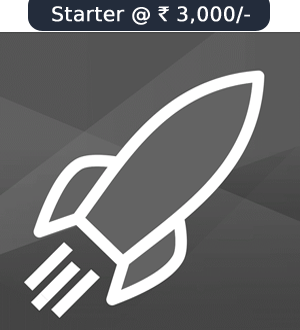
<style>
.page{position:relative;width:300px;height:330px}
.page>*{position:absolute;margin:0}
.t1{font:20px "RupeeForadian";color:#ffffff;font-weight:bold}
</style>
<div class="page">
<p class="t1" style="left:52px;top:6px;width:198px;height:19px">Starter @ ` 3,000/-</p>
</div>
